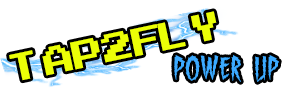
<style>
.page{position:relative;width:300px;height:100px;background:#ffffff}
.page>*{position:absolute;margin:0}
.t1{font:54.7px "ArcadeClassic";color:#ebff07}
.t2{font:30px "ShockTherapyBB";color:#3caaff}
</style>
<div class="page">
<p class="t1" style="left:9px;top:11px;width:208px;height:70px;rotate:-12deg">tap2fly</p>
<p class="t2" style="left:174px;top:55px;width:105px;height:27px">POWER UP</p>
</div>
